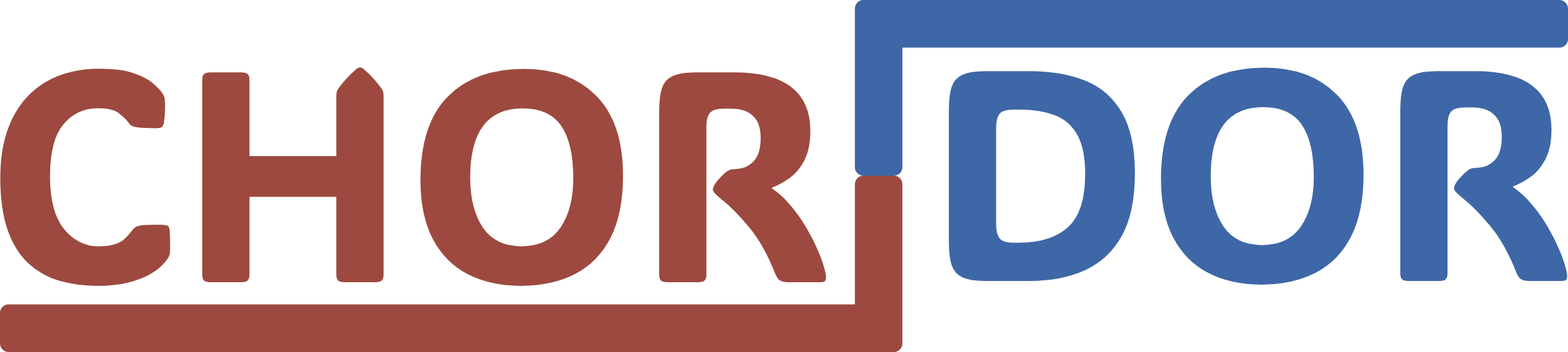
<style>
.page{position:relative;width:1568px;height:352px;background:#ffffff}
.page>*{position:absolute;margin:0}
.t1{font:299.8px "ADLaMDisplay-Regular";color:#9d493f}
.t2{font:299.8px "ADLaMDisplay-Regular";color:#3e67a7}
</style>
<div class="page">
<p class="t1" style="left:0px;top:67px;width:827px;height:219px">CHOR</p>
<p class="t2" style="left:949px;top:67px;width:619px;height:218px">DOR</p>
</div>
